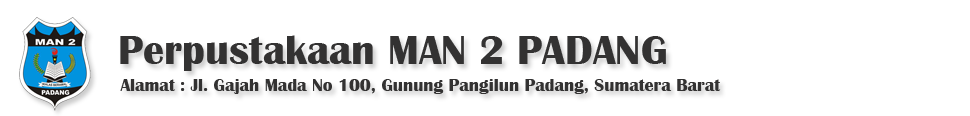
<style>
.page{position:relative;width:970px;height:116px;background:#ffffff}
.page>*{position:absolute;margin:0}
.t1{font:42px "BritannicBold";color:#333232}
.t2{font:18px "BritannicBold";color:#333232}
</style>
<div class="page">
<p class="t1" style="left:120px;top:35px;width:546px;height:36px">Perpustakaan MAN 2 PADANG</p>
<p class="t2" style="left:120px;top:79px;width:601px;height:15px">Alamat : Jl. Gajah Mada No 100, Gunung Pangilun Padang, Sumatera Barat</p>
</div>
